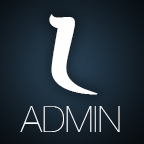
<style>
.page{position:relative;width:144px;height:144px}
.page>*{position:absolute;margin:0}
.t1{font:67.4px "PrinceofPersia";color:#fefefe}
.t2{font:36px "HelveticaNeue-UltraLight";color:#fefefe}
</style>
<div class="page">
<p class="t1" style="left:49px;top:14px;width:49px;height:81px">L</p>
<p class="t2" style="left:20px;top:106px;width:100px;height:26px">ADMIN</p>
</div>
